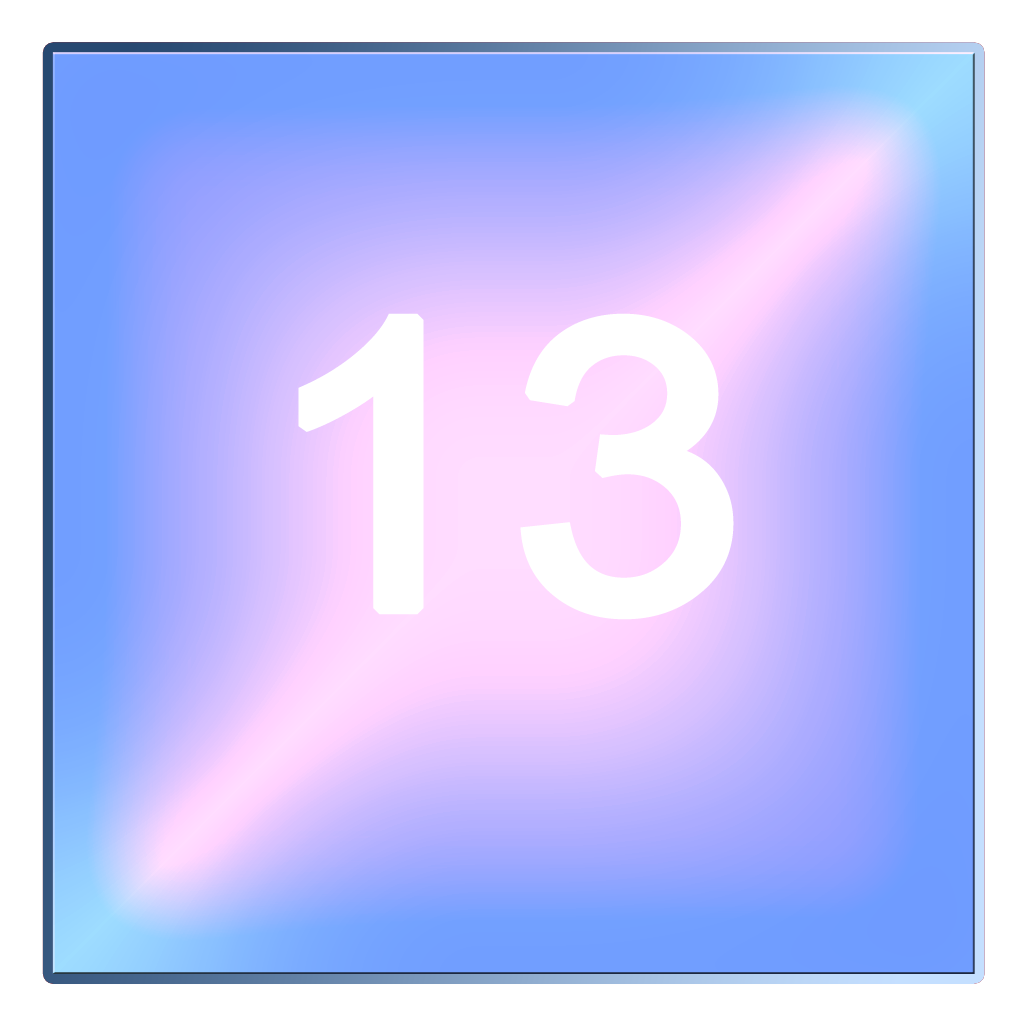
<style>
.page{position:relative;width:1024px;height:1024px}
.page>*{position:absolute;margin:0}
.t1{font:400px "ArialNarrow";color:#ffffff;font-weight:bold;scale:1.3 1}
</style>
<div class="page">
<p class="t1" style="left:298px;top:313px;width:436px;height:307px">13</p>
</div>
